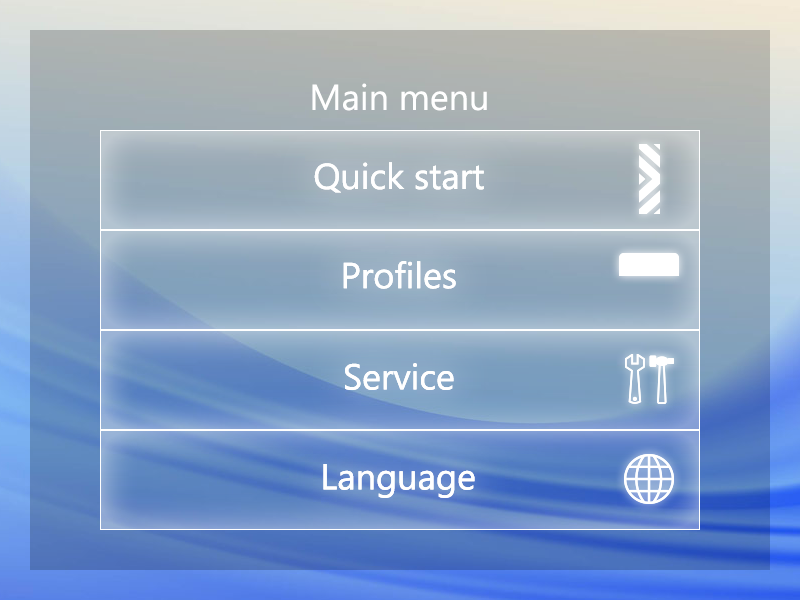
<style>
.page{position:relative;width:800px;height:600px}
.page>*{position:absolute;margin:0}
.t1{font:36px "SegoeUI";color:#ffffff}
</style>
<div class="page">
<p class="t1" style="left:312px;top:83px;width:175px;height:28px">Main menu</p>
<p class="t1" style="left:314px;top:162px;width:170px;height:31px">Quick start</p>
<p class="t1" style="left:314px;top:162px;width:170px;height:31px">Quick start</p>
<p class="t1" style="left:343px;top:261px;width:113px;height:28px">Profiles</p>
<p class="t1" style="left:343px;top:261px;width:113px;height:28px">Profiles</p>
<p class="t1" style="left:345px;top:363px;width:109px;height:27px">Service</p>
<p class="t1" style="left:345px;top:363px;width:109px;height:27px">Service</p>
<p class="t1" style="left:323px;top:464px;width:152px;height:34px">Language</p>
<p class="t1" style="left:323px;top:464px;width:152px;height:34px">Language</p>
</div>
